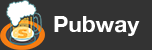
<style>
.page{position:relative;width:152px;height:50px;background:#333333}
.page>*{position:absolute;margin:0}
.t1{font:22.2px "HelveticaNeue-Bold";color:#ffffff}
</style>
<div class="page">
<p class="t1" style="left:54px;top:16px;width:86px;height:20px">Pubway</p>
</div>
